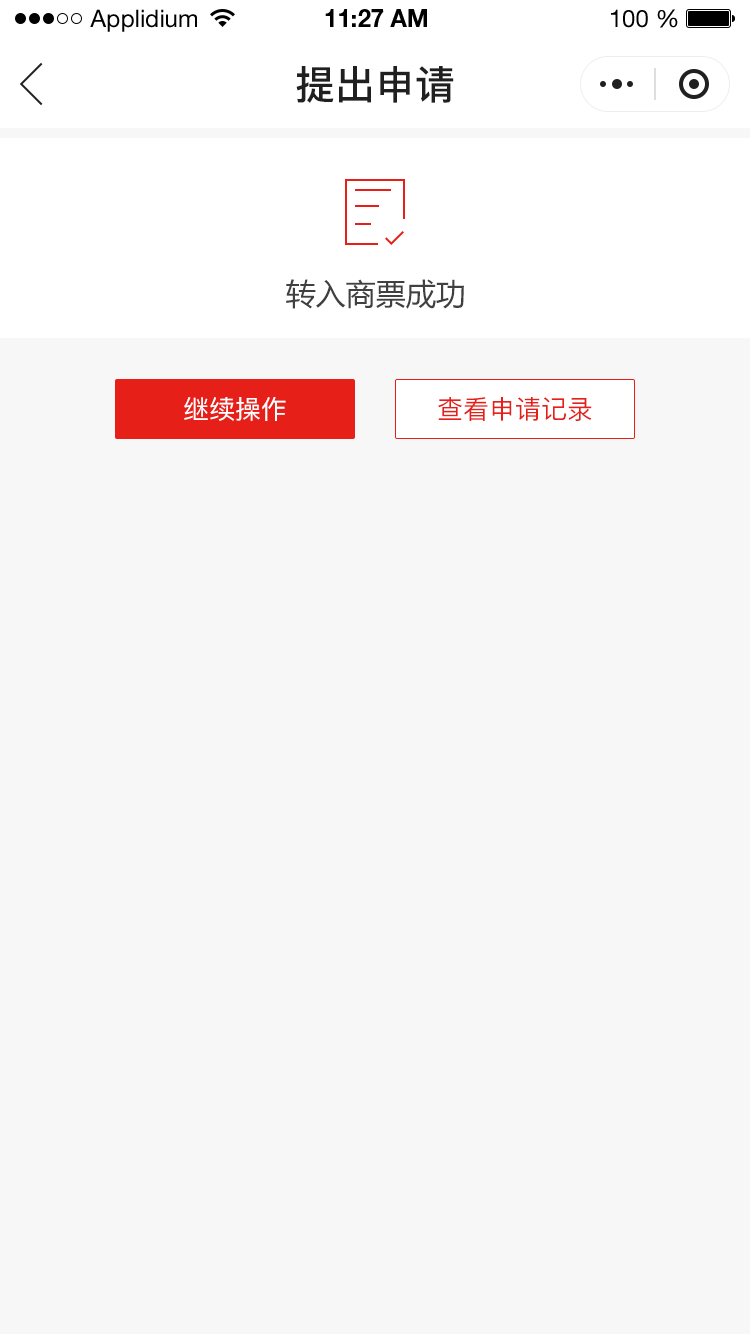
<style>
.page{position:relative;width:750px;height:1334px;background:#f7f7f7}
.page>*{position:absolute;margin:0}
.t1{font:24px "HelveticaNeueLTStd-Roman";color:#000000}
.t2{font:24px "HelveticaNeueLTStd-Bd";color:#000000}
.t3{font:40px "PingFang-SC-Bold";color:#202020;text-transform:uppercase}
.t4{font:30px "MicrosoftYaHei";color:#404040;text-transform:uppercase}
.t5{font:26px "PingFang-SC-Medium";color:#ffffff;text-transform:uppercase}
.t6{font:26px "PingFang-SC-Medium";color:#e61f18;text-transform:uppercase}
</style>
<div class="page">
<p class="t1" style="left:90px;top:9px;width:107px;height:23px">Applidium</p>
<p class="t2" style="left:325px;top:9px;width:102px;height:18px">11:27 AM</p>
<p class="t1" style="left:611px;top:9px;width:67px;height:19px">100 %</p>
<p class="t3" style="left:296px;top:66px;width:158px;height:37px">提出申请</p>
<p class="t4" style="left:286px;top:279px;width:178px;height:30px">转入商票成功</p>
<p class="t5" style="left:184px;top:397px;width:102px;height:24px">继续操作</p>
<p class="t6" style="left:438px;top:397px;width:154px;height:24px">查看申请记录</p>
</div>
